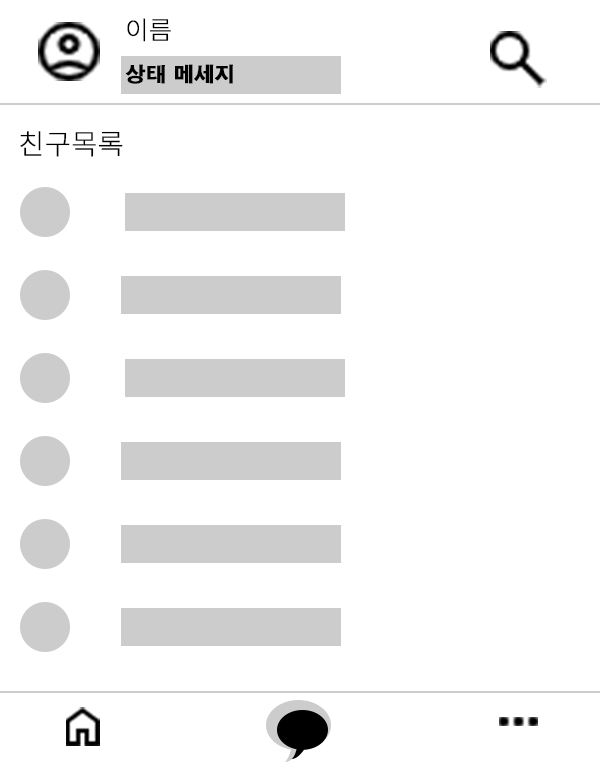
<style>
.page{position:relative;width:600px;height:768px;background:#ffffff}
.page>*{position:absolute;margin:0}
.t1{font:25px "NotoSansKR-Thin";color:#000000;font-weight:bold}
.t2{font:20px "H2gtrE";color:#000000;font-weight:bold}
.t3{font:28px "NotoSansKR-Thin";color:#000000;font-weight:bold}
</style>
<div class="page">
<p class="t1" style="left:127px;top:18px;width:44px;height:24px">이름</p>
<p class="t2" style="left:125px;top:64px;width:108px;height:20px">상태 메세지</p>
<p class="t3" style="left:20px;top:131px;width:103px;height:26px">친구목록</p>
</div>
